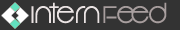
<style>
.page{position:relative;width:180px;height:30px;background:#333333}
.page>*{position:absolute;margin:0}
.t1{font:23px "Vonique92";color:#f0d7d7}
.t2{font:23px "Vonique92";color:#a79e9e}
</style>
<div class="page">
<p class="t1" style="left:31px;top:2px;width:69px;height:22px">Intern</p>
<p class="t2" style="left:103px;top:2px;width:64px;height:22px">Feed</p>
</div>
